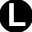
<style>
.page{position:relative;width:32px;height:32px;background:#000000}
.page>*{position:absolute;margin:0}
.t1{font:32px "Raleway-Bold";color:#ffffff}
</style>
<div class="page">
<p class="t1" style="left:9px;top:3px;width:17px;height:23px">L</p>
</div>
